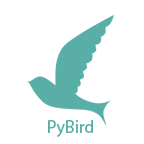
<style>
.page{position:relative;width:144px;height:144px;background:#ffffff}
.page>*{position:absolute;margin:0}
.t1{font:18px "MyriadPro-Regular";color:#59afa8}
</style>
<div class="page">
<p class="t1" style="left:48px;top:120px;width:45px;height:17px">PyBird</p>
</div>
